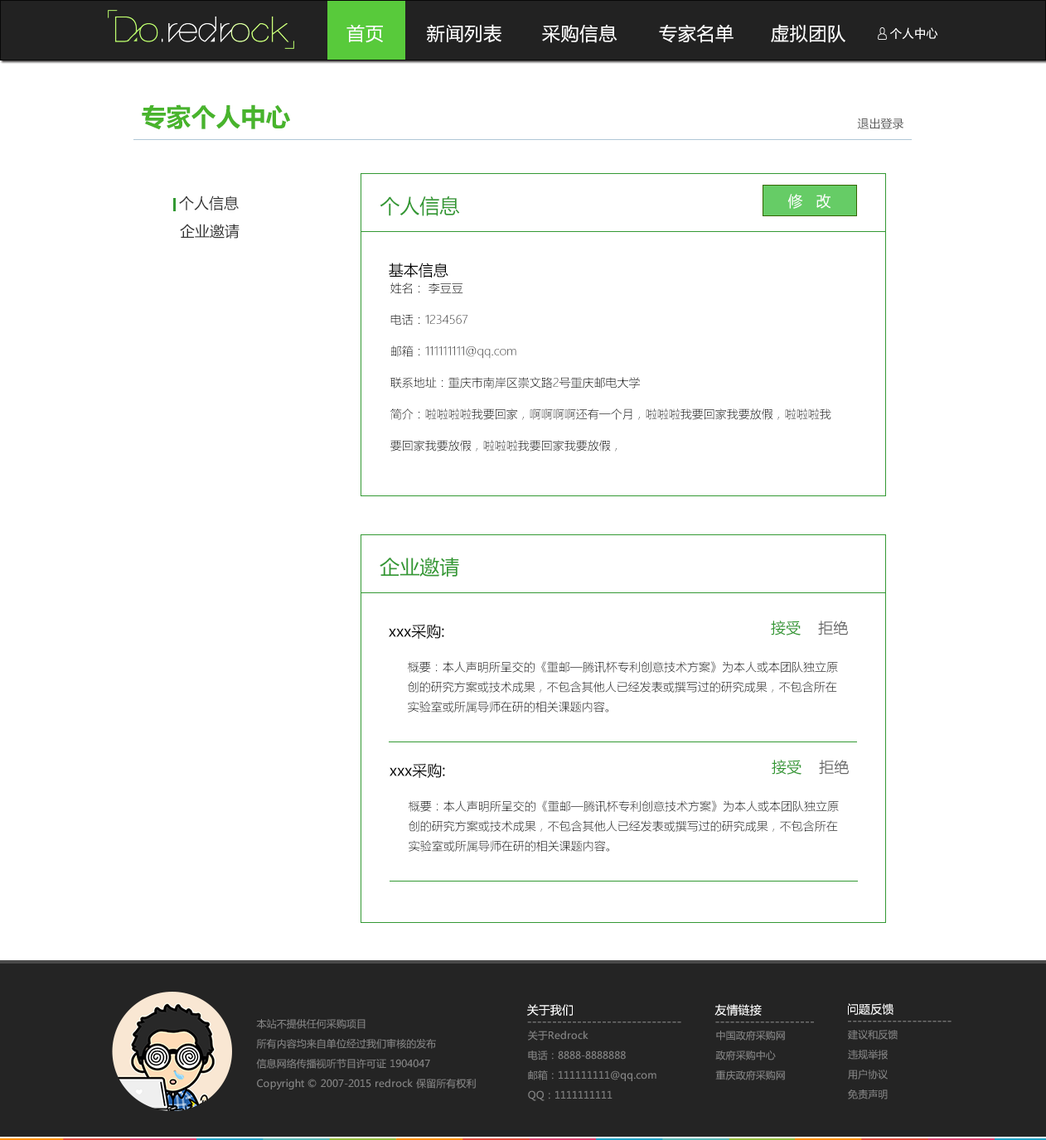
<style>
.page{position:relative;width:1046px;height:1140px;background:#ffffff}
.page>*{position:absolute;margin:0}
.t1{font:18.2px "MicrosoftYaHei";letter-spacing:0.035em;color:#ffffff}
.t2{font:11.6px "MicrosoftYaHei";letter-spacing:0.035em;color:#ffffff}
.t3{font:24.9px "MicrosoftYaHei-Bold";color:#48b42c}
.t4{font:11.6px "MicrosoftYaHei";color:#5b5b5b}
.t5{font:14.9px "MicrosoftYaHei";color:#333333}
.t6{font:19.9px "MicrosoftYaHei";color:#339933}
.t7{font:14.9px "MicrosoftYaHei";color:#ffffff}
.t8{font:14.9px "MicrosoftYaHei";color:#000000}
.t9{font:11.6px/31.5px "MicrosoftYaHeiLight";color:#000000}
.t10{font:14.9px "MicrosoftYaHei";color:#339933}
.t11{font:14.9px "MicrosoftYaHei";color:#666666}
.t12{font:11.6px/19.9px "MicrosoftYaHeiLight";color:#000000}
.t13{font:11.6px "MicrosoftYaHei";color:#ffffff}
.t14{font:9.9px/19.9px "MicrosoftYaHei";color:#858585}
.t15{font:11.6px "MicrosoftYaHei";color:#858585}
</style>
<div class="page">
<p class="t1" style="left:346px;top:24px;width:37px;height:19px">首页</p>
<p class="t1" style="left:427px;top:24px;width:74px;height:19px">新闻列表</p>
<p class="t1" style="left:542px;top:24px;width:75px;height:19px">采购信息</p>
<p class="t1" style="left:659px;top:24px;width:74px;height:19px">专家名单</p>
<p class="t1" style="left:771px;top:24px;width:74px;height:19px">虚拟团队</p>
<p class="t2" style="left:890px;top:27px;width:48px;height:13px">个人中心</p>
<p class="t3" style="left:142px;top:104px;width:148px;height:26px">专家个人中心</p>
<p class="t4" style="left:857px;top:118px;width:46px;height:11px">退出登录</p>
<p class="t5" style="left:179px;top:196px;width:60px;height:14px">个人信息</p>
<p class="t6" style="left:380px;top:196px;width:80px;height:20px">个人信息</p>
<p class="t7" style="left:787px;top:194px;width:44px;height:15px">修   改</p>
<p class="t5" style="left:180px;top:224px;width:59px;height:15px">企业邀请</p>
<p class="t8" style="left:389px;top:263px;width:59px;height:15px">基本信息</p>
<p class="t9" style="left:390px;top:283px;width:441px;height:169px">姓名： 李豆豆<br>电话：1234567<br>邮箱：111111111@qq.com<br>联系地址：重庆市南岸区崇文路2号重庆邮电大学<br>简介：啦啦啦啦我要回家，啊啊啊啊还有一个月，啦啦啦我要回家我要放假，啦啦啦我<br>要回家我要放假，啦啦啦我要回家我要放假，</p>
<p class="t6" style="left:380px;top:558px;width:79px;height:19px">企业邀请</p>
<p class="t8" style="left:389px;top:624px;width:55px;height:15px">xxx采购:</p>
<p class="t10" style="left:771px;top:621px;width:77px;height:15px">接受    <span class="t11">拒绝</span></p>
<p class="t12" style="left:408px;top:661px;width:430px;height:52px">概要：本人声明所呈交的《重邮—腾讯杯专利创意技术方案》为本人或本团队独立原<br>创的研究方案或技术成果，不包含其他人已经发表或撰写过的研究成果，不包含所在<br>实验室或所属导师在研的相关课题内容。</p>
<p class="t10" style="left:771px;top:760px;width:78px;height:15px">接受    <span class="t11">拒绝</span></p>
<p class="t8" style="left:389px;top:763px;width:56px;height:15px">xxx采购:</p>
<p class="t12" style="left:409px;top:800px;width:430px;height:52px">概要：本人声明所呈交的《重邮—腾讯杯专利创意技术方案》为本人或本团队独立原<br>创的研究方案或技术成果，不包含其他人已经发表或撰写过的研究成果，不包含所在<br>实验室或所属导师在研的相关课题内容。</p>
<p class="t13" style="left:527px;top:1004px;width:46px;height:12px">关于我们</p>
<p class="t13" style="left:714px;top:1004px;width:48px;height:12px">友情链接</p>
<p class="t13" style="left:848px;top:1004px;width:45px;height:11px">问题反馈</p>
<p class="t14" style="left:256px;top:1019px;width:220px;height:71px">本站不提供任何采购项目<br>所有内容均来自单位经过我们审核的发布<br>信息网络传播视听节目许可证 1904047<br>Copyright © 2007-2015 redrock 保留所有权利</p>
<p class="t15" style="left:527px;top:1022px;width:154px;height:1px">-------------------------------</p>
<p class="t15" style="left:715px;top:1022px;width:99px;height:1px">--------------------</p>
<p class="t15" style="left:848px;top:1021px;width:103px;height:2px">---------------------</p>
<p class="t14" style="left:528px;top:1031px;width:128px;height:70px">关于Redrock<br>电话：8888-8888888<br>邮箱：111111111@qq.com<br>QQ：1111111111</p>
<p class="t14" style="left:715px;top:1031px;width:70px;height:50px">中国政府采购网<br>政府采购中心<br>重庆政府采购网</p>
<p class="t14" style="left:848px;top:1030px;width:49px;height:70px">建议和反馈<br>违规举报<br>用户协议<br>免责声明</p>
</div>
